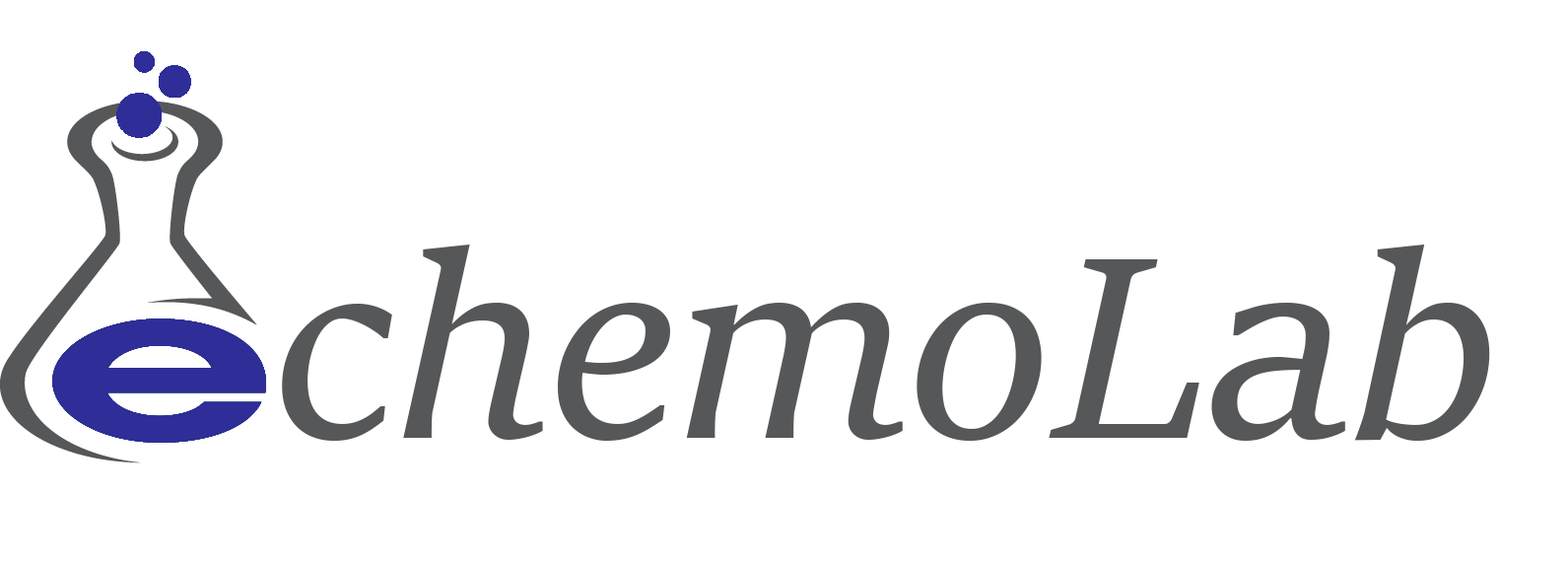
<style>
.page{position:relative;width:1568px;height:564px;background:#ffffff}
.page>*{position:absolute;margin:0}
.t1{font:283.3px "SitkaSubheading-Italic";color:#555759}
</style>
<div class="page">
<p class="t1" style="left:282px;top:244px;width:1208px;height:197px">chemoLab</p>
</div>
